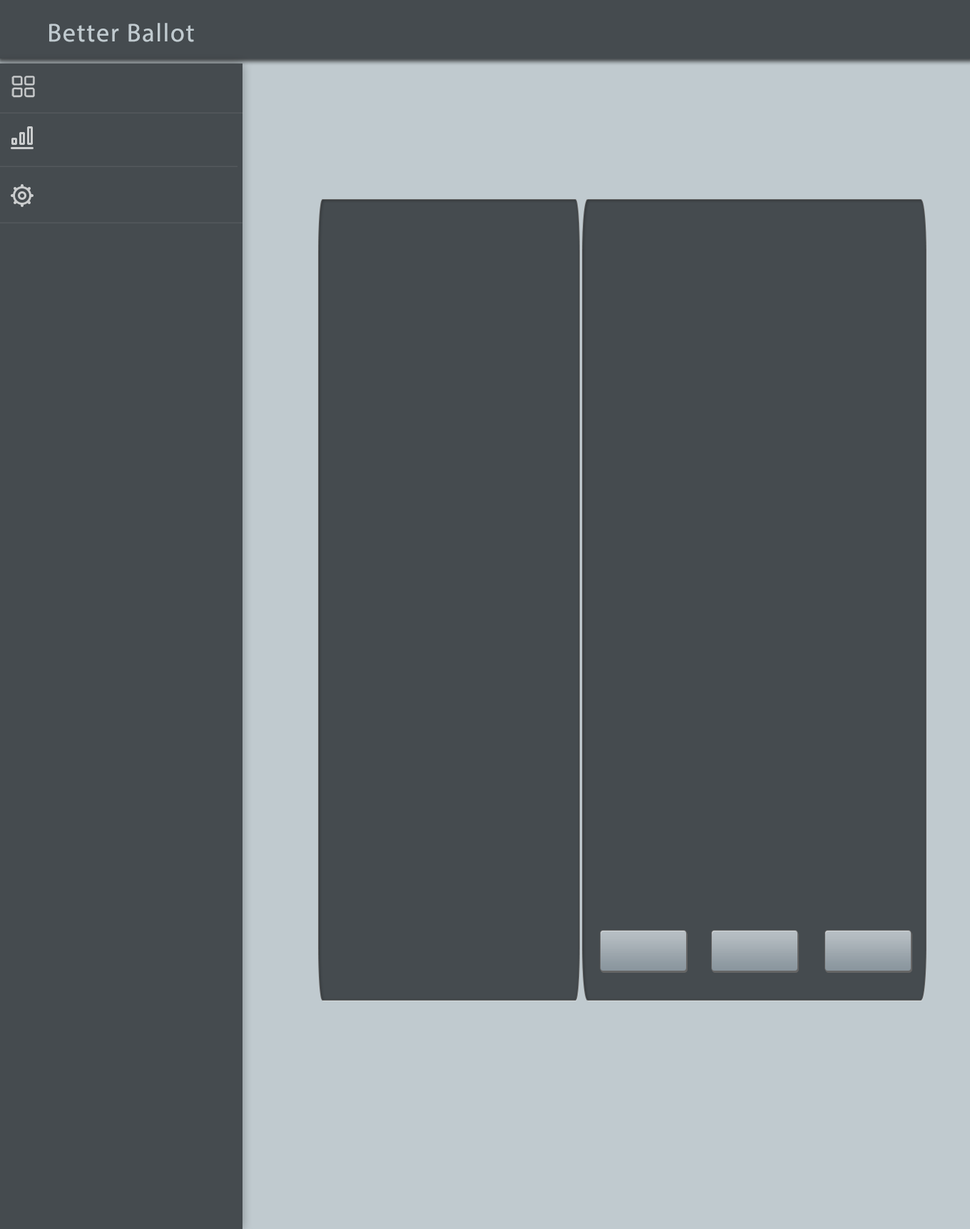
<style>
.page{position:relative;width:970px;height:1229px;background:#454b4f}
.page>*{position:absolute;margin:0}
.t1{font:25.7px "MyriadPro-Regular";letter-spacing:0.05em;color:#c0cacf}
</style>
<div class="page">
<p class="t1" style="left:49px;top:23px;width:145px;height:19px">Better Ballot</p>
</div>
